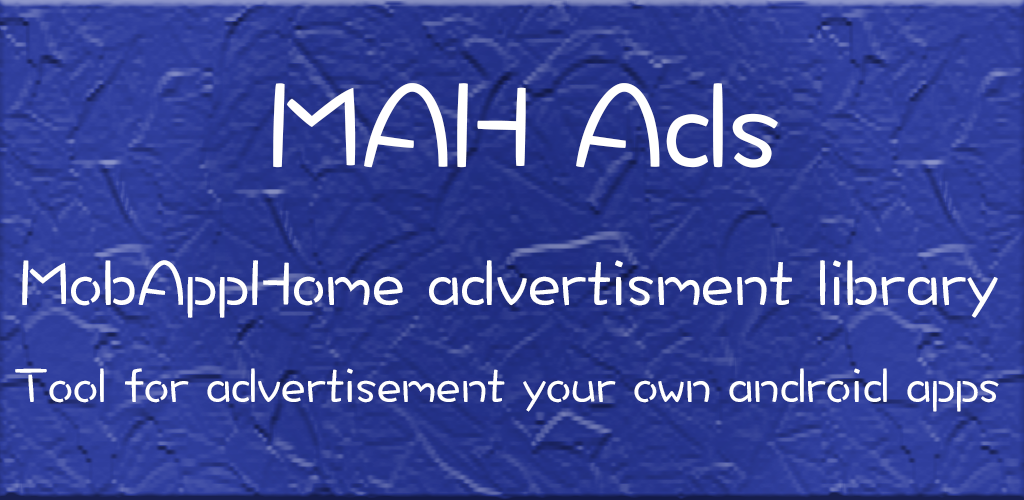
<style>
.page{position:relative;width:1024px;height:500px}
.page>*{position:absolute;margin:0}
.t1{font:125px "DFWaWaTC-W5";color:#ffffff}
.t2{font:66.7px "DFWaWaTC-W5";color:#ffffff}
.t3{font:50px "DFWaWaTC-W5";color:#ffffff}
</style>
<div class="page">
<p class="t1" style="left:273px;top:83px;width:505px;height:85px">MAH Ads</p>
<p class="t2" style="left:22px;top:260px;width:976px;height:58px">MobAppHome advertisment library</p>
<p class="t3" style="left:15px;top:368px;width:984px;height:44px">Tool for advertisement your own android apps</p>
</div>
